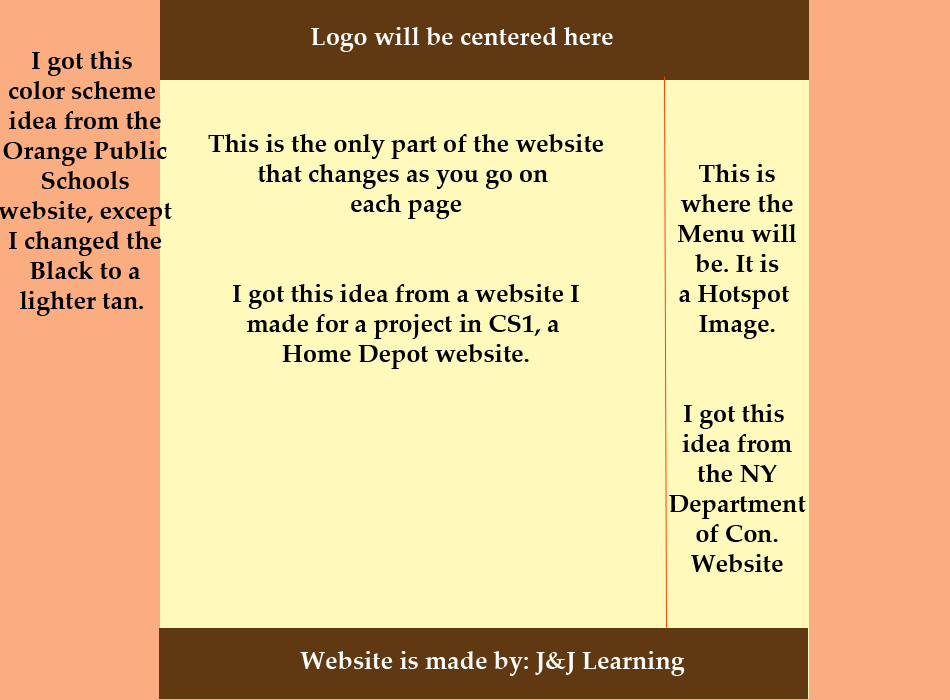
<style>
.page{position:relative;width:950px;height:700px;background:#fffabc}
.page>*{position:absolute;margin:0}
.t1{font:25px "PalatinoLinotype-Bold";color:#fdfdfd}
.t2{font:25px "PalatinoLinotype-Bold";color:#000000}
.t3{font:25px "PalatinoLinotype-Bold";color:#fffefe}
</style>
<div class="page">
<p class="t1" style="left:311px;top:27px;width:302px;height:25px">Logo will be centered here</p>
<p class="t2" style="left:0px;top:51px;width:172px;height:265px;text-align:center">I got this <br>color scheme <br>idea from the<br>Orange Public<br>Schools<br>website, except<br>I changed the<br>Black to a<br>lighter tan.</p>
<p class="t2" style="left:208px;top:134px;width:396px;height:235px;text-align:center">This is the only part of the website<br>that changes as you go on <br>each page<br><br><br>I got this idea from a website I<br>made for a project in CS1, a <br>Home Depot website.</p>
<p class="t2" style="left:669px;top:164px;width:137px;height:408px;text-align:center">This is<br>where the<br>Menu will<br>be. It is<br>a Hotspot <br>Image.<br><br><br>I got this <br>idea from<br>the NY<br>Department<br>of Con.<br>Website</p>
<p class="t3" style="left:300px;top:651px;width:385px;height:25px">Website is made by: J&amp;J Learning</p>
</div>
